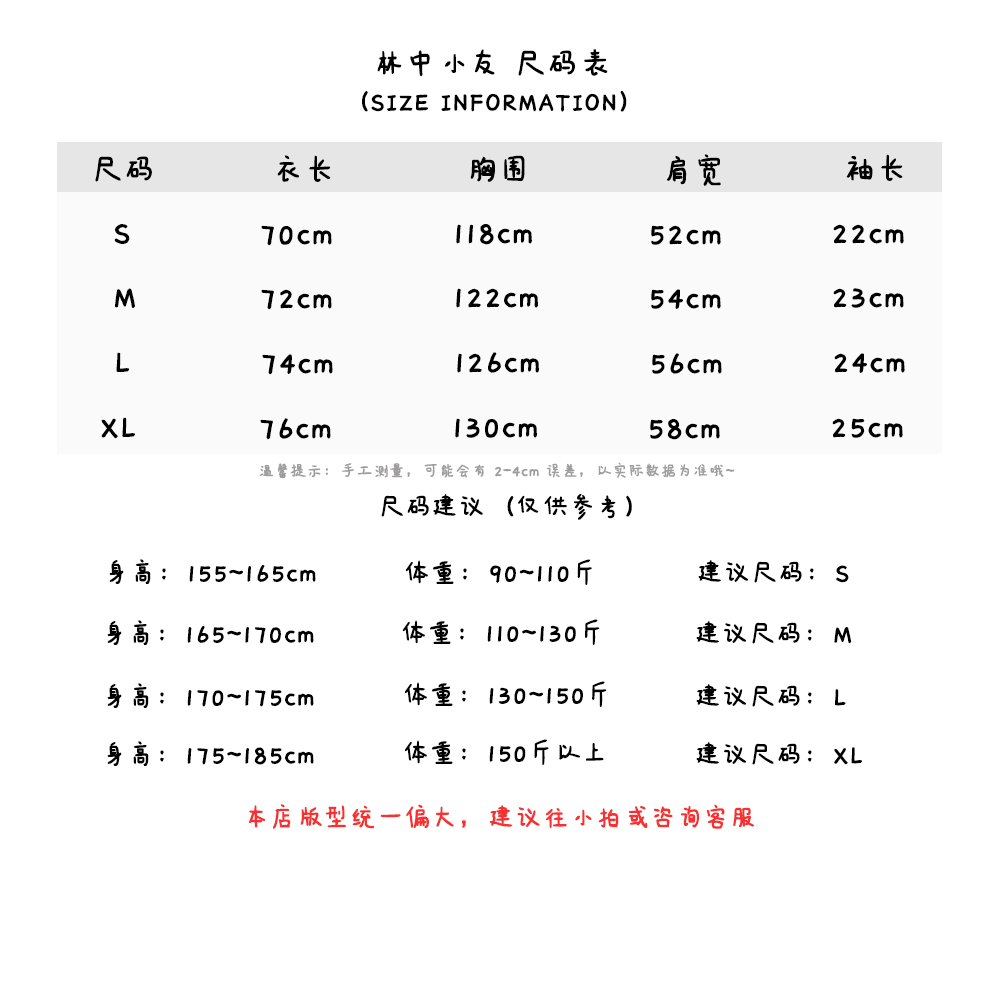
<style>
.page{position:relative;width:1000px;height:1000px;background:#ffffff}
.page>*{position:absolute;margin:0}
.t1{font:36px "IdeaFonts-QianXiaTi";color:#000000;font-weight:bold}
.t2{font:30px "IdeaFonts-QianXiaTi";color:#000000;font-weight:bold}
.t3{font:18px "IdeaFonts-QianXiaTi";color:#9f9d9d;font-weight:bold}
.t4{font:30px "IdeaFonts-QianXiaTi";color:#f73131;font-weight:bold}
</style>
<div class="page">
<p class="t1" style="left:377px;top:49px;width:231px;height:28px">林中小友 尺码表</p>
<p class="t2" style="left:362px;top:90px;width:265px;height:22px">（SIZE INFORMATION）</p>
<p class="t1" style="left:95px;top:156px;width:57px;height:26px">尺码</p>
<p class="t1" style="left:277px;top:155px;width:54px;height:27px">衣长</p>
<p class="t1" style="left:470px;top:155px;width:55px;height:27px">胸围</p>
<p class="t1" style="left:667px;top:154px;width:54px;height:32px">肩宽</p>
<p class="t1" style="left:846px;top:154px;width:57px;height:27px">袖长</p>
<p class="t1" style="left:114px;top:224px;width:16px;height:20px">S</p>
<p class="t1" style="left:261px;top:225px;width:71px;height:21px">70cm</p>
<p class="t1" style="left:456px;top:224px;width:76px;height:21px">118cm</p>
<p class="t1" style="left:651px;top:225px;width:70px;height:20px">52cm</p>
<p class="t1" style="left:833px;top:224px;width:71px;height:20px">22cm</p>
<p class="t1" style="left:115px;top:288px;width:20px;height:20px">M</p>
<p class="t1" style="left:261px;top:289px;width:71px;height:21px">72cm</p>
<p class="t1" style="left:456px;top:288px;width:82px;height:20px">122cm</p>
<p class="t1" style="left:651px;top:289px;width:70px;height:20px">54cm</p>
<p class="t1" style="left:833px;top:288px;width:71px;height:20px">23cm</p>
<p class="t1" style="left:116px;top:352px;width:14px;height:20px">L</p>
<p class="t1" style="left:457px;top:352px;width:82px;height:21px">126cm</p>
<p class="t1" style="left:652px;top:353px;width:70px;height:21px">56cm</p>
<p class="t1" style="left:834px;top:353px;width:71px;height:20px">24cm</p>
<p class="t1" style="left:262px;top:354px;width:71px;height:21px">74cm</p>
<p class="t1" style="left:101px;top:417px;width:34px;height:22px">XL</p>
<p class="t1" style="left:260px;top:418px;width:71px;height:22px">76cm</p>
<p class="t1" style="left:455px;top:418px;width:82px;height:20px">130cm</p>
<p class="t1" style="left:650px;top:419px;width:70px;height:21px">58cm</p>
<p class="t1" style="left:832px;top:418px;width:71px;height:20px">25cm</p>
<p class="t3" style="left:259px;top:462px;width:476px;height:16px">温馨提示：手工测量，可能会有 2-4cm 误差，以实际数据为准哦~</p>
<p class="t2" style="left:381px;top:493px;width:251px;height:27px">尺码建议（仅供参考）</p>
<p class="t2" style="left:109px;top:559px;width:207px;height:25px">身高：155~165cm</p>
<p class="t2" style="left:406px;top:559px;width:186px;height:26px">体重：90~110斤</p>
<p class="t2" style="left:698px;top:560px;width:151px;height:23px">建议尺码：S</p>
<p class="t2" style="left:107px;top:620px;width:207px;height:25px">身高：165~170cm</p>
<p class="t2" style="left:403px;top:619px;width:197px;height:26px">体重：110~130斤</p>
<p class="t2" style="left:696px;top:621px;width:156px;height:23px">建议尺码：M</p>
<p class="t2" style="left:107px;top:683px;width:207px;height:25px">身高：170~175cm</p>
<p class="t2" style="left:405px;top:681px;width:202px;height:26px">体重：130~150斤</p>
<p class="t2" style="left:696px;top:684px;width:150px;height:23px">建议尺码：L</p>
<p class="t2" style="left:107px;top:741px;width:207px;height:25px">身高：175~185cm</p>
<p class="t2" style="left:405px;top:739px;width:199px;height:26px">体重：150斤以上</p>
<p class="t2" style="left:696px;top:742px;width:166px;height:23px">建议尺码：XL</p>
<p class="t4" style="left:249px;top:804px;width:505px;height:25px">本店版型统一偏大，建议往小拍或咨询客服</p>
</div>
